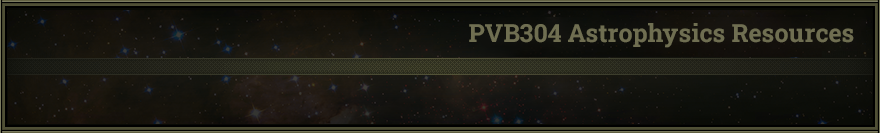
<style>
.page{position:relative;width:880px;height:133px}
.page>*{position:absolute;margin:0}
.t1{font:25px "RobotoSlab-Bold";color:#6f6e51}
</style>
<div class="page">
<p class="t1" style="left:469px;top:23px;width:385px;height:25px">PVB304 Astrophysics Resources</p>
</div>
